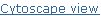
<style>
.page{position:relative;width:101px;height:16px;background:#ffffff}
.page>*{position:absolute;margin:0}
.t1{font:12px "Verdana";color:#336699}
</style>
<div class="page">
<p class="t1" style="left:1px;top:3px;width:97px;height:12px">Cytoscape view</p>
</div>
